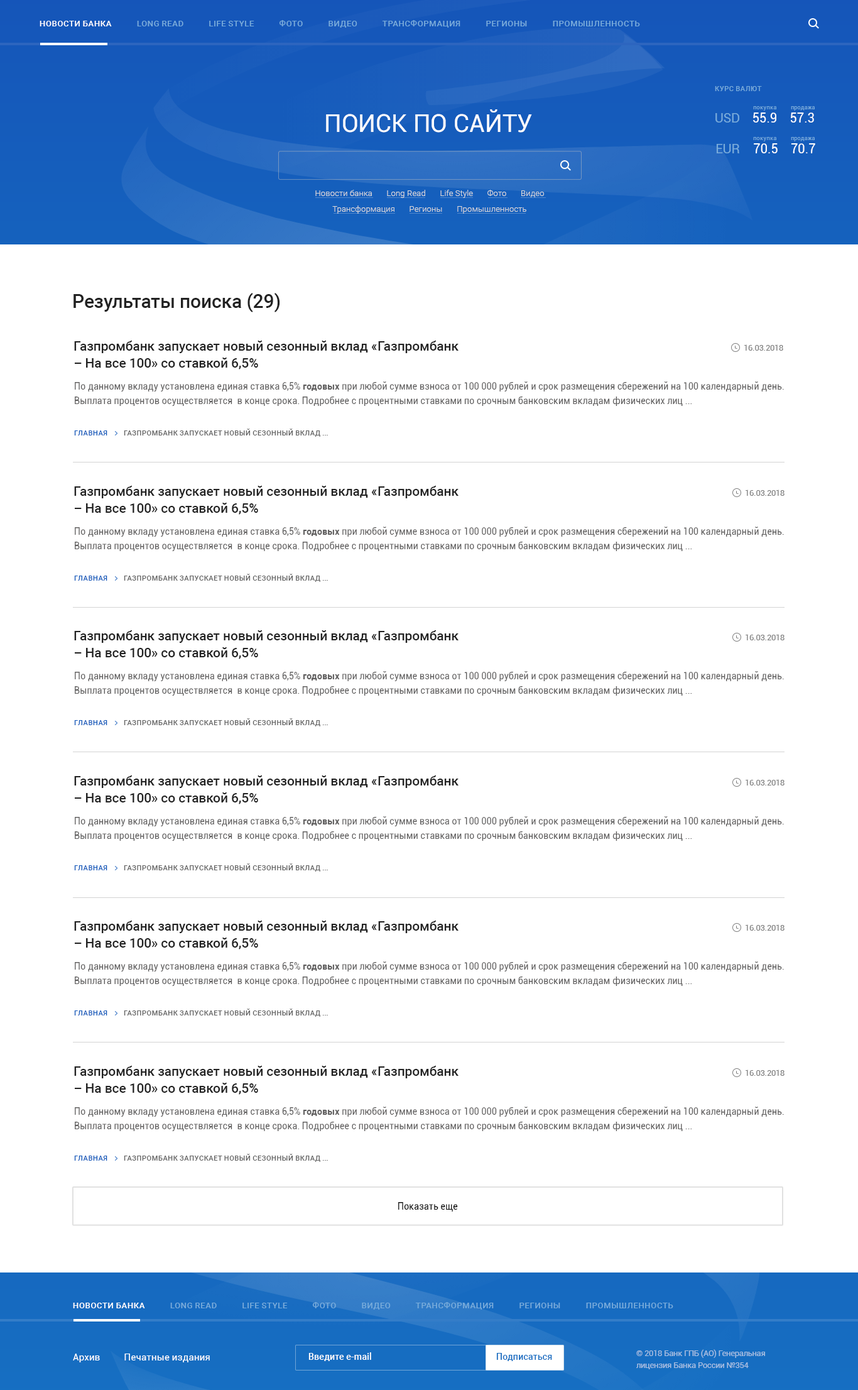
<style>
.page{position:relative;width:858px;height:1390px;background:#ffffff}
.page>*{position:absolute;margin:0}
.t1{font:8.2px "Roboto-Medium";color:#78acdb;text-transform:uppercase}
.t2{font:8.2px "Roboto-Medium";color:#ffffff;text-transform:uppercase}
.t3{font:6.9px "Roboto-Medium";color:#78acdb;text-transform:uppercase}
.t4{font:24.8px "Roboto-Regular";color:#ffffff;text-transform:uppercase}
.t5{font:13.2px "Roboto-Regular";color:#78acdb}
.t6{font:13.2px "Roboto-Regular";color:#ffffff;scale:0.96 1}
.t7{font:5.7px "Roboto-Regular";color:#78acdb}
.t8{font:8.2px/15.7px "Roboto-Light";color:#dbdbdb}
.t9{font:18.8px "Roboto-Medium";color:#222222}
.t10{font:13.2px/17px "Roboto-Medium";color:#222222}
.t11{font:8.2px "Roboto-Regular";color:#7e7e7e;scale:0.96 1}
.t12{font:9.4px/14.4px "Roboto-Regular";color:#5f5e5e;scale:0.96 1}
.t13{font:9.4px/14.4px "Roboto-Bold";color:#5f5e5e;scale:0.96 1}
.t14{font:6.9px "Roboto-Medium";color:#636363;text-transform:uppercase}
.t15{font:6.9px "Roboto-Medium";color:#155bbb;text-transform:uppercase}
.t16{font:9.4px "Roboto-Regular";color:#000000;scale:0.96 1}
.t17{font:8.2px/11.9px "Roboto-Regular";color:#a7bfe1;scale:0.96 1}
.t18{font:9.4px "Roboto-Regular";color:#ffffff}
.t19{font:9.4px "Roboto-Medium";color:#ffffff;scale:0.96 1}
.t20{font:9.4px "Roboto-Medium";color:#166ec2;scale:0.96 1}
</style>
<div class="page">
<p class="t1" style="left:40px;top:20px;width:600px;height:8px"><span class="t2">Новости банка          </span>  Long Read            Life Style            Фото            Видео            Трансформация            Регионы            Промышленность</p>
<p class="t3" style="left:715px;top:86px;width:47px;height:5px">курс валют</p>
<p class="t4" style="left:326px;top:109px;width:206px;height:24px">Поиск по сайту</p>
<p class="t5" style="left:716px;top:113px;width:23px;height:9px">USD</p>
<p class="t6" style="left:753px;top:112px;width:61px;height:10px">55.9    57.3</p>
<p class="t7" style="left:753px;top:106px;width:23px;height:5px">покупка</p>
<p class="t7" style="left:791px;top:106px;width:24px;height:5px">продажа</p>
<p class="t7" style="left:753px;top:137px;width:23px;height:4px">покупка</p>
<p class="t7" style="left:791px;top:137px;width:24px;height:4px">продажа</p>
<p class="t5" style="left:716px;top:144px;width:23px;height:9px">EUR</p>
<p class="t6" style="left:754px;top:143px;width:61px;height:10px">70.5    70.7</p>
<p class="t8" style="left:315px;top:190px;width:230px;height:24px;text-align:center">Новости банка       Long Read       Life Style       Фото       Видео<br>Трансформация       Регионы       Промышленность</p>
<p class="t9" style="left:73px;top:293px;width:207px;height:19px">Результаты поиска (29)</p>
<p class="t10" style="left:74px;top:340px;width:385px;height:29px">Газпромбанк запускает новый сезонный вклад «Газпромбанк<br>– На все 100» со ставкой 6,5%</p>
<p class="t11" style="left:744px;top:344px;width:39px;height:7px">16.03.2018</p>
<p class="t12" style="left:75px;top:381px;width:709px;height:25px">По данному вкладу установлена единая ставка 6,5% <span class="t13">годовых </span>при любой сумме взноса от 100 000 рублей и срок размещения сбережений на 100 календарный день.<br>Выплата процентов осуществляется  в конце срока. Подробнее с процентными ставками по срочным банковским вкладам физических лиц ...</p>
<p class="t14" style="left:74px;top:428px;width:254px;height:9px"><span class="t15">Главная         </span>Газпромбанк запускает новый сезонный вклад ...</p>
<p class="t10" style="left:74px;top:486px;width:385px;height:28px">Газпромбанк запускает новый сезонный вклад «Газпромбанк<br>– На все 100» со ставкой 6,5%</p>
<p class="t11" style="left:746px;top:489px;width:39px;height:7px">16.03.2018</p>
<p class="t12" style="left:75px;top:526px;width:709px;height:25px">По данному вкладу установлена единая ставка 6,5% <span class="t13">годовых </span>при любой сумме взноса от 100 000 рублей и срок размещения сбережений на 100 календарный день.<br>Выплата процентов осуществляется  в конце срока. Подробнее с процентными ставками по срочным банковским вкладам физических лиц ...</p>
<p class="t14" style="left:74px;top:574px;width:254px;height:8px"><span class="t15">Главная         </span>Газпромбанк запускает новый сезонный вклад ...</p>
<p class="t10" style="left:74px;top:630px;width:385px;height:29px">Газпромбанк запускает новый сезонный вклад «Газпромбанк<br>– На все 100» со ставкой 6,5%</p>
<p class="t11" style="left:746px;top:634px;width:39px;height:6px">16.03.2018</p>
<p class="t12" style="left:75px;top:671px;width:709px;height:24px">По данному вкладу установлена единая ставка 6,5% <span class="t13">годовых </span>при любой сумме взноса от 100 000 рублей и срок размещения сбережений на 100 календарный день.<br>Выплата процентов осуществляется  в конце срока. Подробнее с процентными ставками по срочным банковским вкладам физических лиц ...</p>
<p class="t14" style="left:74px;top:718px;width:254px;height:8px"><span class="t15">Главная         </span>Газпромбанк запускает новый сезонный вклад ...</p>
<p class="t10" style="left:74px;top:775px;width:385px;height:29px">Газпромбанк запускает новый сезонный вклад «Газпромбанк<br>– На все 100» со ставкой 6,5%</p>
<p class="t11" style="left:746px;top:779px;width:39px;height:6px">16.03.2018</p>
<p class="t12" style="left:75px;top:816px;width:709px;height:25px">По данному вкладу установлена единая ставка 6,5% <span class="t13">годовых </span>при любой сумме взноса от 100 000 рублей и срок размещения сбережений на 100 календарный день.<br>Выплата процентов осуществляется  в конце срока. Подробнее с процентными ставками по срочным банковским вкладам физических лиц ...</p>
<p class="t14" style="left:74px;top:863px;width:254px;height:8px"><span class="t15">Главная         </span>Газпромбанк запускает новый сезонный вклад ...</p>
<p class="t10" style="left:74px;top:920px;width:385px;height:29px">Газпромбанк запускает новый сезонный вклад «Газпромбанк<br>– На все 100» со ставкой 6,5%</p>
<p class="t11" style="left:746px;top:924px;width:39px;height:6px">16.03.2018</p>
<p class="t12" style="left:75px;top:961px;width:709px;height:25px">По данному вкладу установлена единая ставка 6,5% <span class="t13">годовых </span>при любой сумме взноса от 100 000 рублей и срок размещения сбережений на 100 календарный день.<br>Выплата процентов осуществляется  в конце срока. Подробнее с процентными ставками по срочным банковским вкладам физических лиц ...</p>
<p class="t14" style="left:74px;top:1008px;width:254px;height:8px"><span class="t15">Главная         </span>Газпромбанк запускает новый сезонный вклад ...</p>
<p class="t10" style="left:74px;top:1065px;width:385px;height:29px">Газпромбанк запускает новый сезонный вклад «Газпромбанк<br>– На все 100» со ставкой 6,5%</p>
<p class="t11" style="left:746px;top:1069px;width:39px;height:6px">16.03.2018</p>
<p class="t12" style="left:75px;top:1106px;width:709px;height:25px">По данному вкладу установлена единая ставка 6,5% <span class="t13">годовых </span>при любой сумме взноса от 100 000 рублей и срок размещения сбережений на 100 календарный день.<br>Выплата процентов осуществляется  в конце срока. Подробнее с процентными ставками по срочным банковским вкладам физических лиц ...</p>
<p class="t14" style="left:74px;top:1153px;width:254px;height:9px"><span class="t15">Главная         </span>Газпромбанк запускает новый сезонный вклад ...</p>
<p class="t16" style="left:398px;top:1202px;width:60px;height:9px">Показать еще</p>
<p class="t1" style="left:73px;top:1302px;width:600px;height:7px"><span class="t2">Новости банка          </span>  Long Read            Life Style            Фото            Видео            Трансформация            Регионы            Промышленность</p>
<p class="t17" style="left:636px;top:1349px;width:129px;height:20px">© 2018 Банк ГПБ (АО) Генеральная<br>лицензия Банка России №354</p>
<p class="t18" style="left:73px;top:1353px;width:137px;height:9px">Архив          Печатные издания</p>
<p class="t19" style="left:308px;top:1352px;width:63px;height:9px">Введите e-mail</p>
<p class="t20" style="left:496px;top:1353px;width:56px;height:8px">Подписаться</p>
</div>
